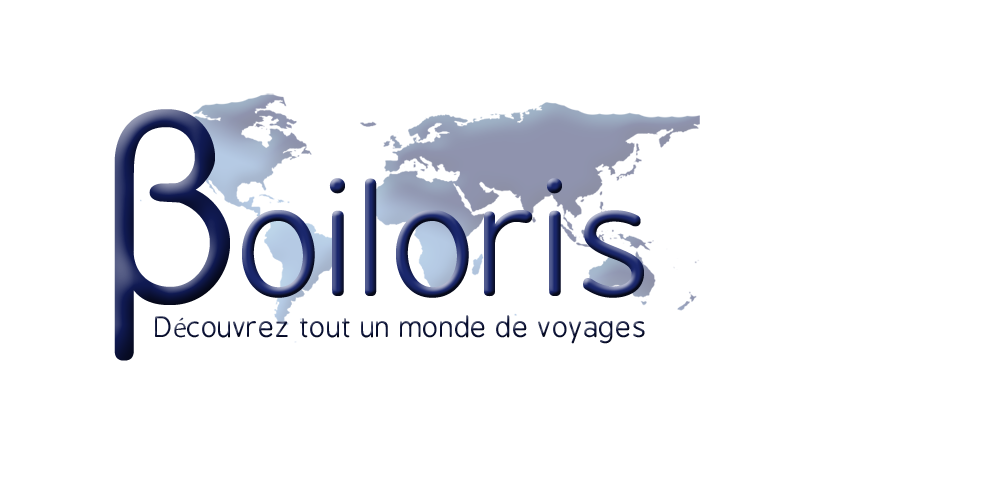
<style>
.page{position:relative;width:1000px;height:500px;background:#ffffff}
.page>*{position:absolute;margin:0}
.t1{font:250px "BPreplay"}
.t2{font:150px "BPreplay"}
.t3{font:28px "BPreplay";color:#0a1136}
.t4{font:28px "EdificeThin";color:#0a1136}
</style>
<div class="page">
<p class="t1" style="left:114px;top:109px;width:116px;height:252px">β</p>
<p class="t2" style="left:242px;top:178px;width:402px;height:120px">oiloris</p>
<p class="t3" style="left:155px;top:315px;width:490px;height:29px">D<span class="t4">é</span>couvrez tout un monde de voyages</p>
</div>
